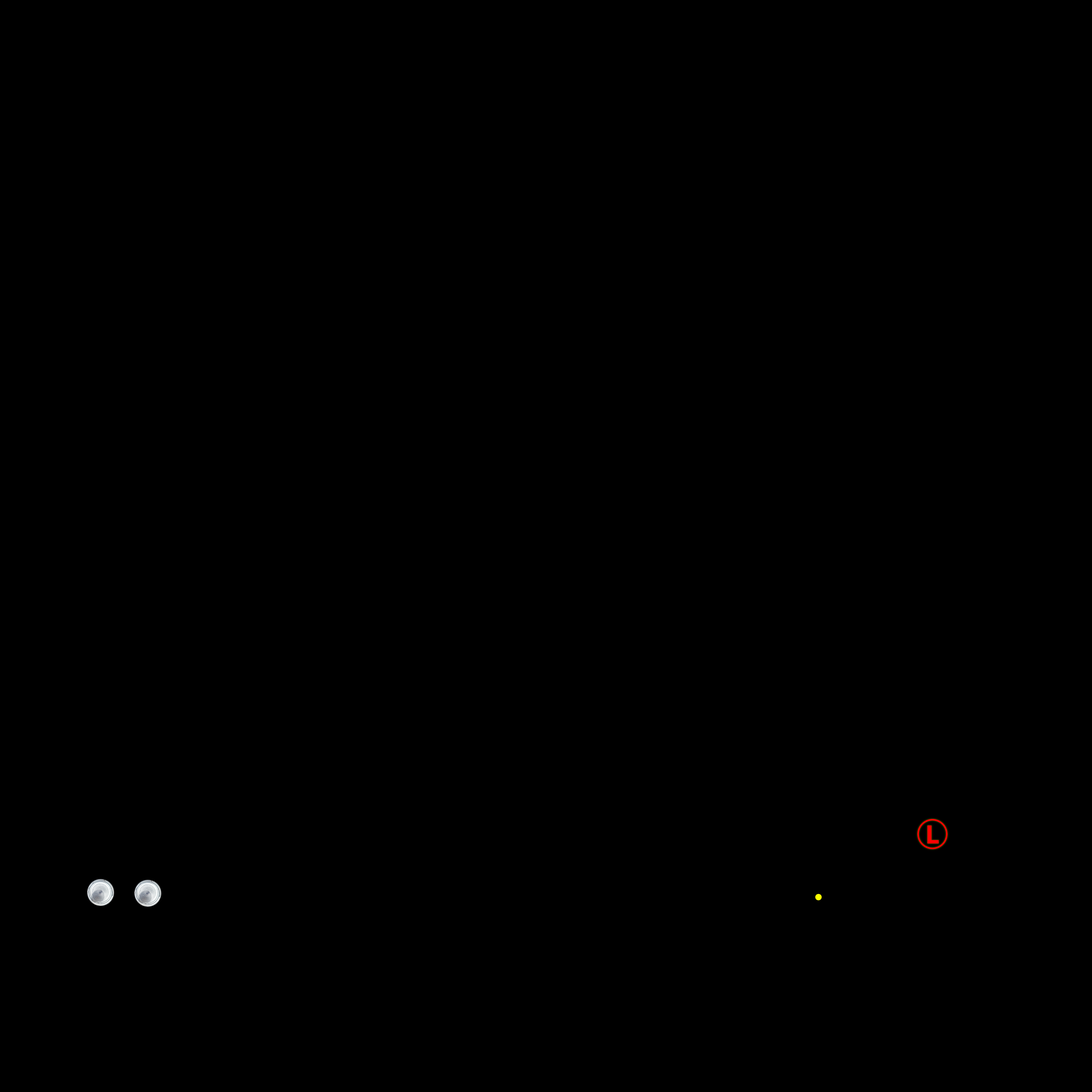
<style>
.page{position:relative;width:1092px;height:1092px;background:#000000}
.page>*{position:absolute;margin:0}
.t1{font:26.7px "MyriadPro-Bold";color:#ff0202}
</style>
<div class="page">
<p class="t1" style="left:927px;top:825px;width:12px;height:19px">L</p>
</div>
